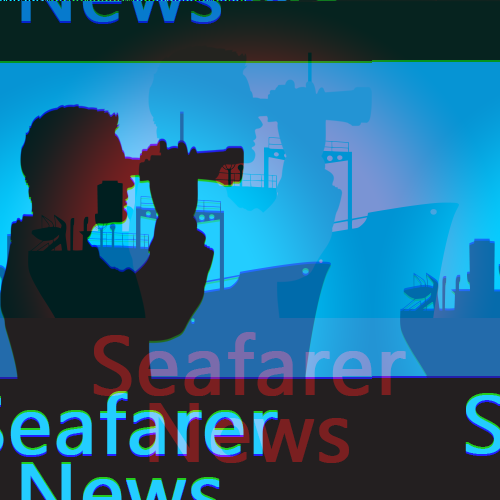
<style>
.page{position:relative;width:500px;height:500px;background:#231f20}
.page>*{position:absolute;margin:0}
.t1{font:83.3px/66.7px "SegoeUISymbol";font-weight:bold}
</style>
<div class="page">
<p class="t1" style="left:93px;top:330px;width:313px;height:131px;text-align:center">Seafarer<br>News</p>
</div>
